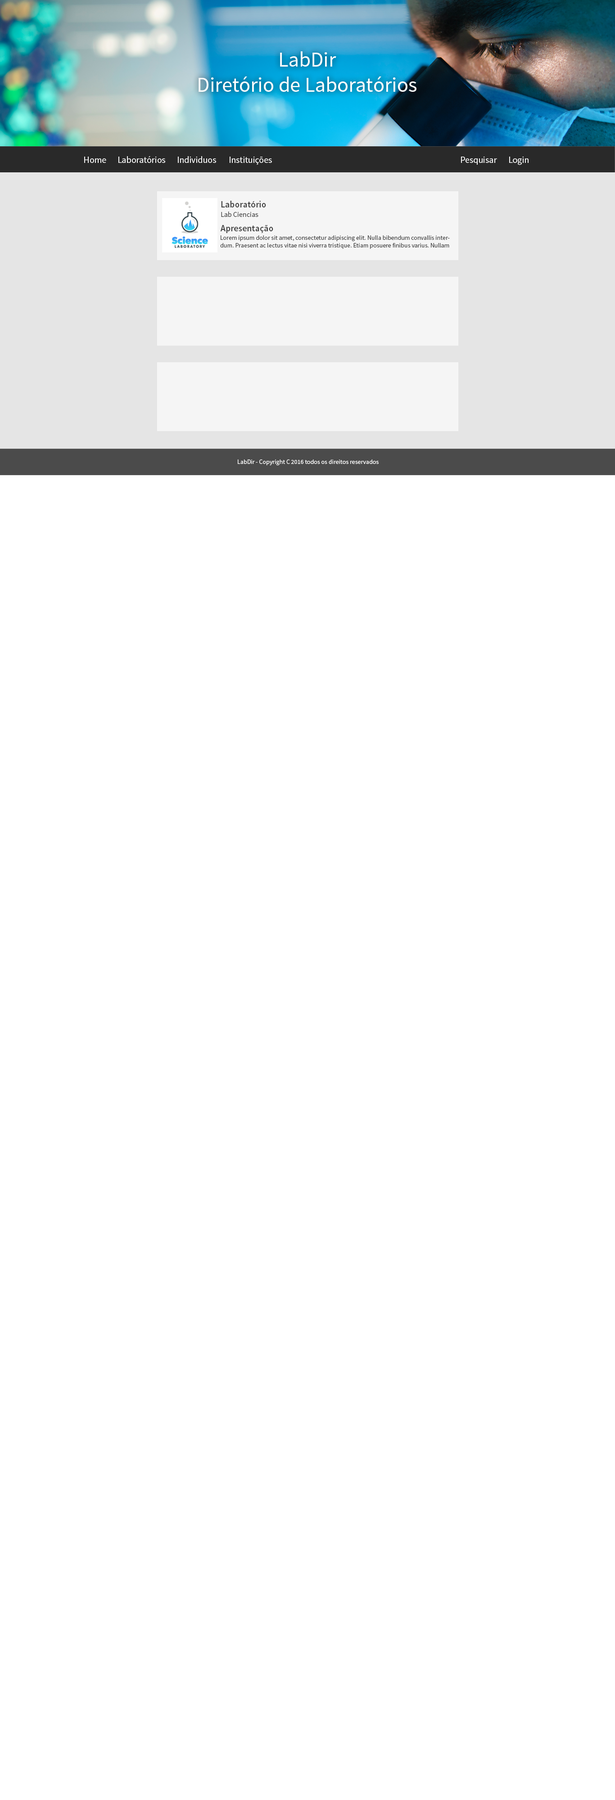
<style>
.page{position:relative;width:615px;height:1800px;background:#ffffff}
.page>*{position:absolute;margin:0}
.t1{font:21px "SourceSansPro-Regular";color:#ffffff}
.t2{font:9px "SourceSansPro-Regular";color:#ffffff}
.t3{font:9px "SourceSansPro-Semibold";color:#414141}
.t4{font:7.2px "SourceSansPro-Regular";color:#414141}
.t5{font:6.3px "SourceSansPro-Regular";color:#414141}
.t6{font:6.3px "SourceSansPro-Regular";color:#ffffff}
</style>
<div class="page">
<p class="t1" style="left:198px;top:51px;width:218px;height:41px;text-align:center">LabDir<br>Diretório de Laboratórios</p>
<p class="t2" style="left:84px;top:157px;width:22px;height:6px">Home</p>
<p class="t2" style="left:118px;top:156px;width:47px;height:7px">Laboratórios</p>
<p class="t2" style="left:178px;top:156px;width:38px;height:7px">Individuos</p>
<p class="t2" style="left:230px;top:157px;width:42px;height:8px">Instituições</p>
<p class="t2" style="left:461px;top:157px;width:36px;height:8px">Pesquisar</p>
<p class="t2" style="left:509px;top:157px;width:19px;height:8px">Login</p>
<p class="t3" style="left:221px;top:201px;width:45px;height:6px">Laboratório</p>
<p class="t4" style="left:221px;top:212px;width:37px;height:5px">Lab Ciencias</p>
<p class="t3" style="left:220px;top:225px;width:53px;height:8px">Apresentação</p>
<p class="t5" style="left:220px;top:235px;width:230px;height:14px">Lorem ipsum dolor sit amet, consectetur adipiscing elit. Nulla bibendum convallis interdum. Praesent ac lectus vitae nisi viverra tristique. Etiam posuere finibus varius. Nullam ullamcorper nulla vel dolor faucibus venenatis.</p>
<p class="t6" style="left:238px;top:459px;width:140px;height:6px">LabDir - Copyright C 2016 todos os direitos reservados</p>
</div>
